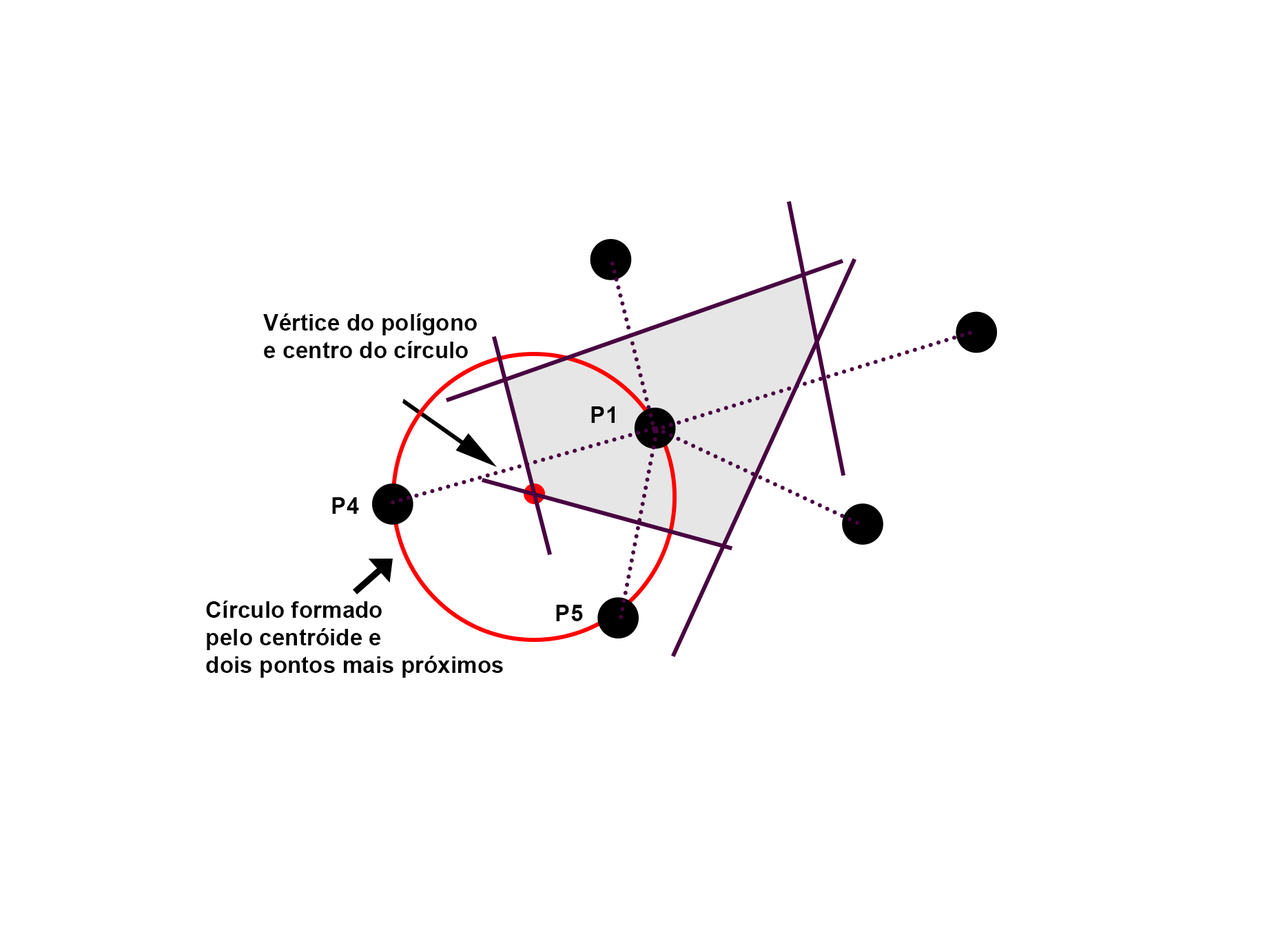
<style>
.page{position:relative;width:1274px;height:936px;background:#ffffff}
.page>*{position:absolute;margin:0}
.t1{font:23px "Arial-BoldMT";color:#030303}
</style>
<div class="page">
<p class="t1" style="left:263px;top:313px;width:214px;height:45px">Vértice do polígono <br>e centro do círculo</p>
<p class="t1" style="left:591px;top:406px;width:23px;height:17px">P1</p>
<p class="t1" style="left:332px;top:497px;width:27px;height:17px">P4</p>
<p class="t1" style="left:206px;top:601px;width:297px;height:77px">Círculo formado <br>pelo centróide e <br>dois pontos mais próximos</p>
<p class="t1" style="left:556px;top:605px;width:27px;height:16px">P5</p>
</div>
